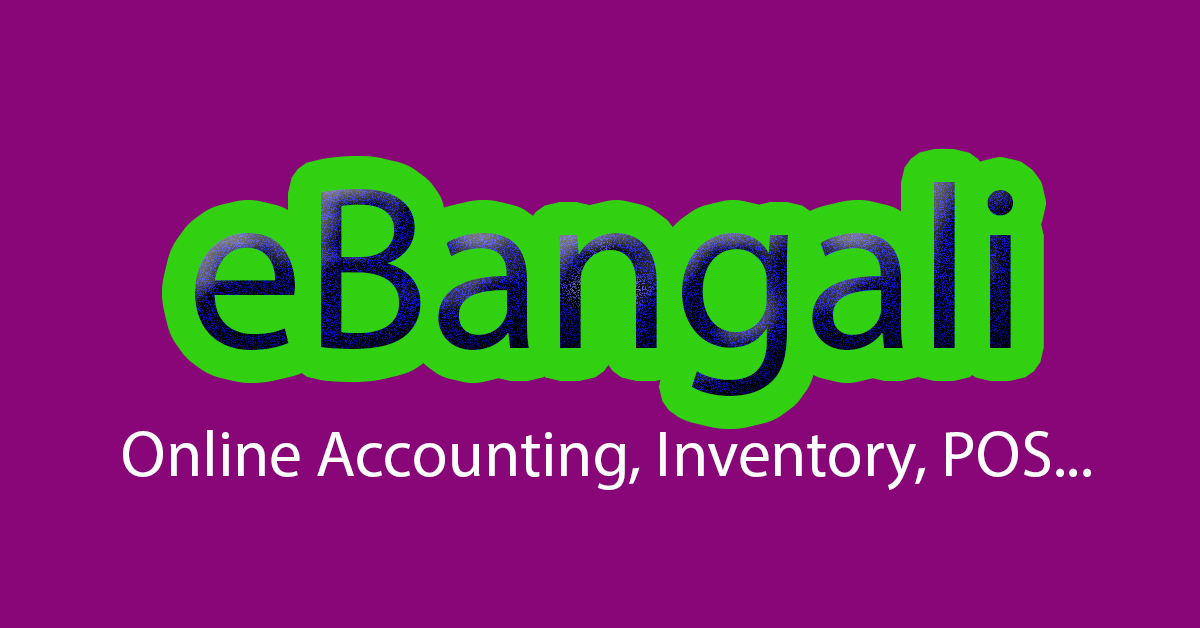
<style>
.page{position:relative;width:1200px;height:628px;background:#890678}
.page>*{position:absolute;margin:0}
.t1{font:234.1px "MyriadPro-Regular"}
.t2{font:65.1px "MyriadPro-Regular";color:#fefcfe}
</style>
<div class="page">
<p class="t1" style="left:195px;top:182px;width:818px;height:215px">eBangali</p>
<p class="t2" style="left:123px;top:430px;width:968px;height:60px">Online Accounting, Inventory, POS...</p>
</div>
